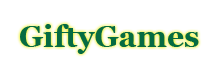
<style>
.page{position:relative;width:216px;height:72px;background:#ffffff}
.page>*{position:absolute;margin:0}
.t1{font:30px "Vani-Bold";color:#066b42}
</style>
<div class="page">
<p class="t1" style="left:20px;top:24px;width:179px;height:30px">GiftyGames</p>
</div>
